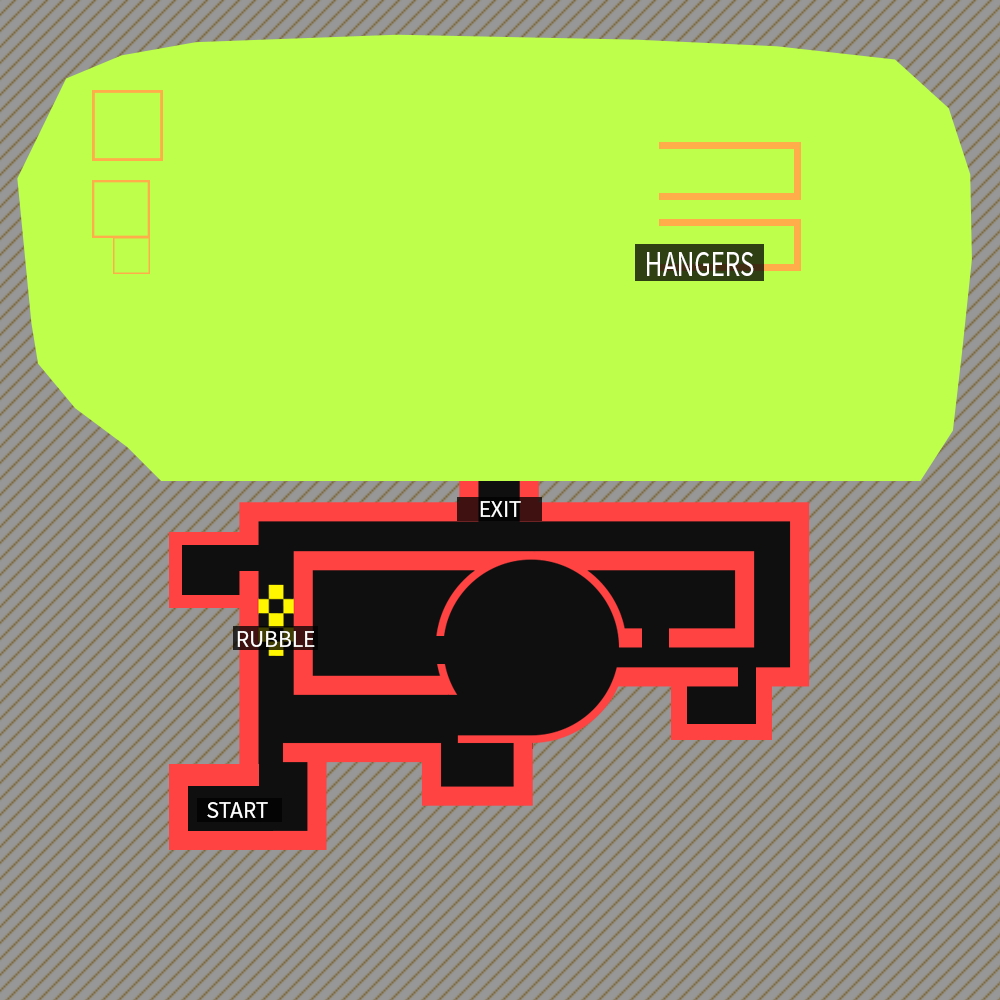
<style>
.page{position:relative;width:1000px;height:1000px;background:#bdff4b}
.page>*{position:absolute;margin:0}
.t1{font:36.2px "SourceSansPro-Regular";color:#ffffff;text-transform:uppercase;scale:0.74 1}
.t2{font:23.5px "SourceSansPro-Regular";color:#ffffff;text-transform:uppercase}
</style>
<div class="page">
<p class="t1" style="left:647px;top:252px;width:107px;height:24px">HANGERs</p>
<p class="t2" style="left:480px;top:501px;width:41px;height:16px">EXIT</p>
<p class="t2" style="left:237px;top:631px;width:78px;height:16px">RUBBLE</p>
<p class="t2" style="left:207px;top:802px;width:61px;height:16px">START</p>
</div>
